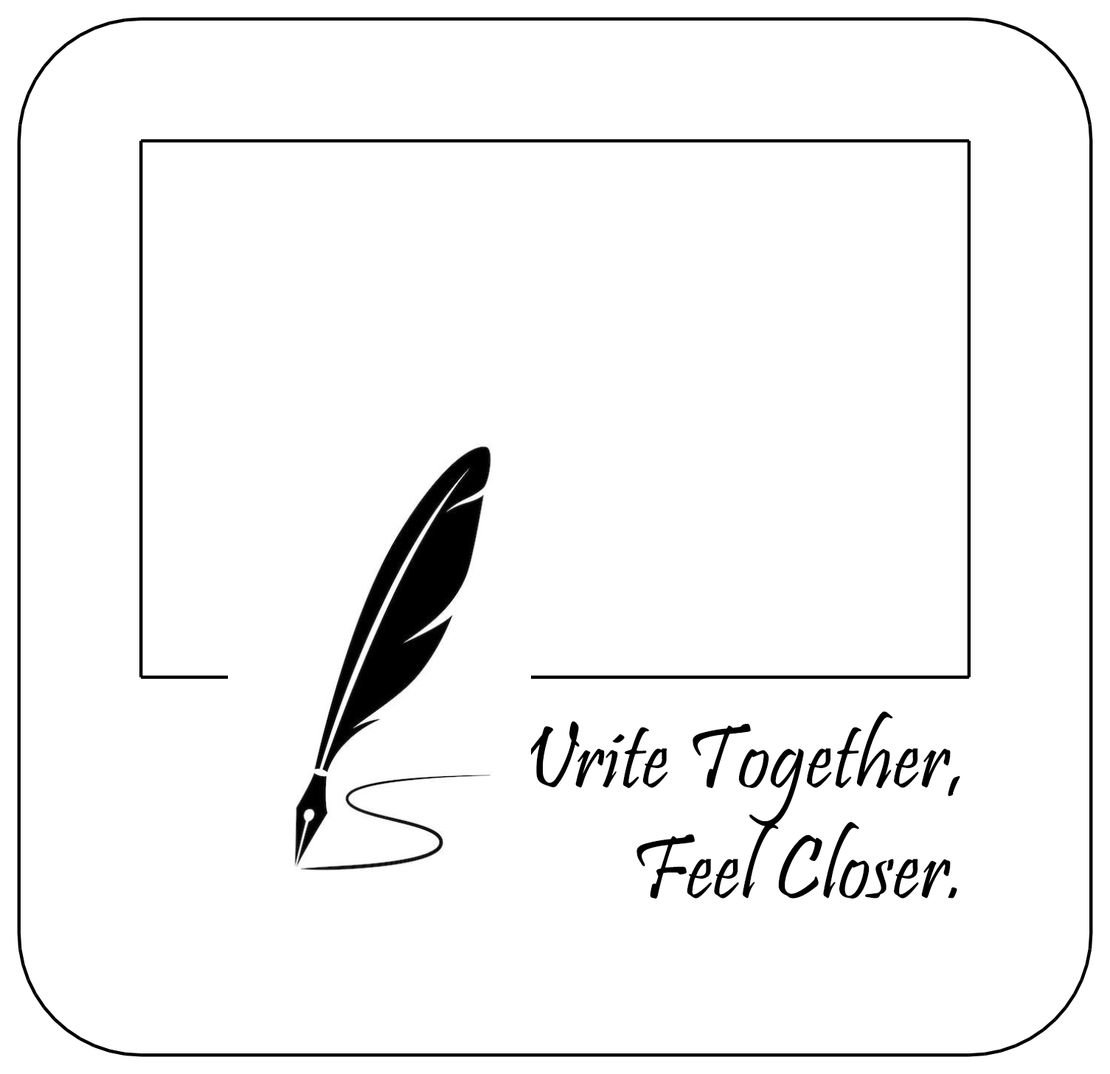
<style>
.page{position:relative;width:1110px;height:1074px;background:#ffffff}
.page>*{position:absolute;margin:0}
.t1{font:92.2px/110.6px "Pristina-Regular";color:#000000}
</style>
<div class="page">
<p class="t1" style="left:490px;top:712px;width:470px;height:187px;text-align:right">Write Together,<br>Feel Closer.</p>
</div>
